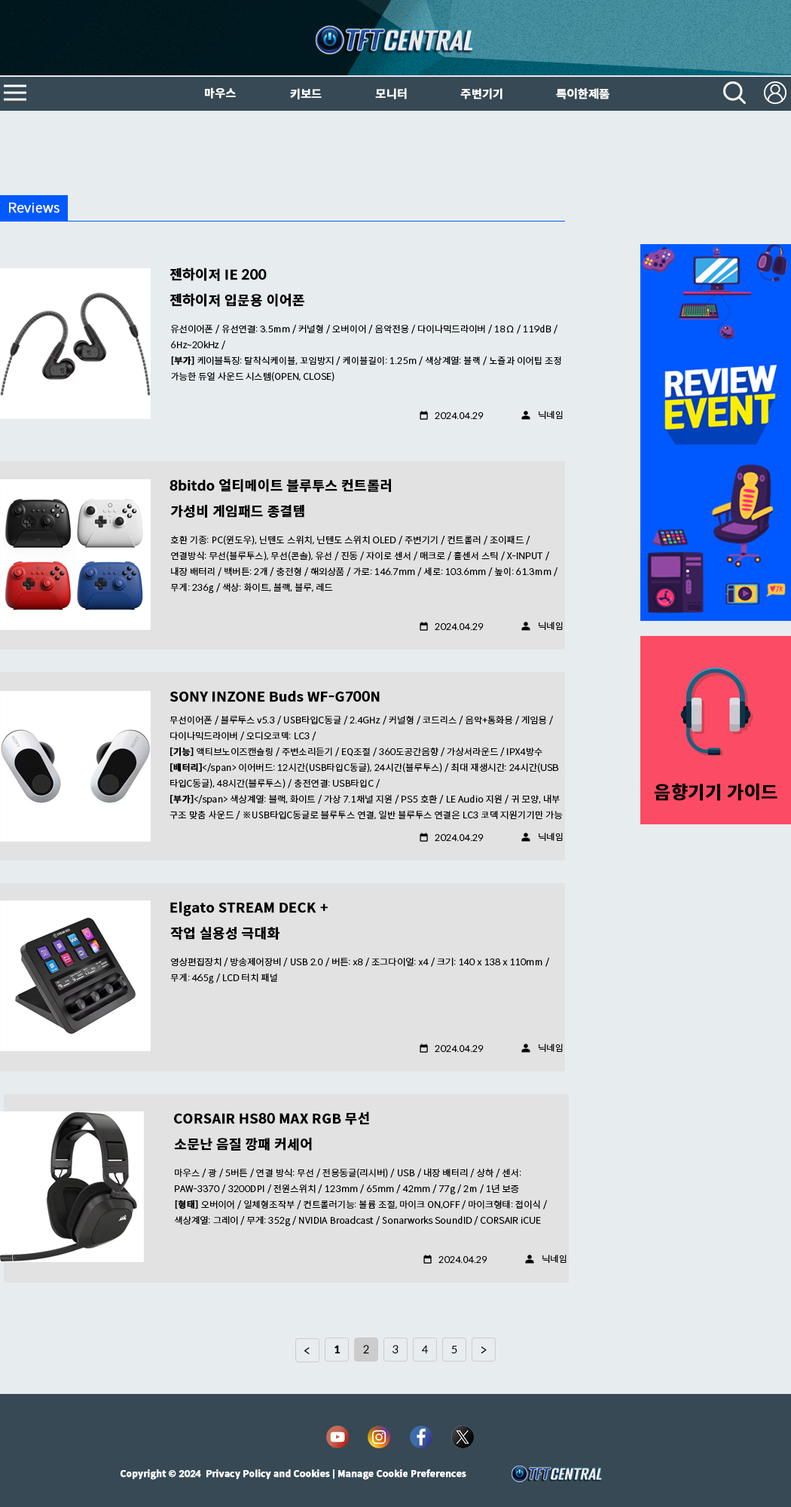
<style>
.page{position:relative;width:791px;height:1507px;background:#e7ecef}
.page>*{position:absolute;margin:0}
.t1{font:11.3px "SpoqaHanSansNeo-Bold";color:#ffffff;font-weight:bold}
.t2{font:13.6px "SpoqaHanSansNeo-Light";color:#ffffff;font-weight:bold}
.t3{font:13.6px "SpoqaHanSansNeo-Bold";color:#000000;font-weight:bold}
.t4{font:9px "SpoqaHanSansNeo-Light";color:#000000;font-weight:bold}
.t5{font:9px "SpoqaHanSansNeo-Bold";color:#000000;font-weight:bold}
.t6{font:12.1px "SpoqaHanSansNeo-Light";color:#000000;font-weight:bold}
.t7{font:10.5px "SpoqaHanSansNeo-Bold";color:#000000;font-weight:bold}
.t8{font:10.5px "SpoqaHanSansNeo-Light";color:#000000;font-weight:bold}
.t9{font:9px "SpoqaHanSansNeo-Bold";color:#ffffff;font-weight:bold}
</style>
<div class="page">
<p class="t1" style="left:205px;top:87px;width:31px;height:12px">마우스</p>
<p class="t1" style="left:290px;top:88px;width:32px;height:11px">키보드</p>
<p class="t1" style="left:375px;top:88px;width:32px;height:11px">모니터</p>
<p class="t1" style="left:460px;top:88px;width:43px;height:11px">주변기기</p>
<p class="t1" style="left:556px;top:88px;width:54px;height:11px">특이한제품</p>
<p class="t2" style="left:9px;top:202px;width:51px;height:11px">Reviews</p>
<p class="t3" style="left:170px;top:268px;width:97px;height:13px">젠하이저 IE 200</p>
<p class="t3" style="left:170px;top:293px;width:134px;height:14px">젠하이저 입문용 이어폰</p>
<p class="t4" style="left:170px;top:324px;width:391px;height:58px">유선이어폰 / 유선연결: 3.5mm / 커널형 / 오버이어 / 음악전용 / 다이나믹드라이버 / 18Ω / 119dB / 6Hz~20kHz /<br><span class="t5">[부가] </span>케이블특징: 탈착식케이블, 꼬임방지 / 케이블길이: 1.25m / 색상계열: 블랙 / 노즐과 이어팁 조정 가능한 듀얼 사운드 시스템(OPEN, CLOSE)</p>
<p class="t4" style="left:435px;top:412px;width:49px;height:8px">2024.04.29</p>
<p class="t4" style="left:539px;top:411px;width:24px;height:9px">닉네임</p>
<p class="t3" style="left:170px;top:478px;width:221px;height:14px">8bitdo 얼티메이트 블루투스 컨트롤러</p>
<p class="t3" style="left:170px;top:505px;width:134px;height:13px">가성비 게임패드 종결템</p>
<p class="t4" style="left:170px;top:535px;width:388px;height:59px">호환 기종: PC(윈도우), 닌텐도 스위치, 닌텐도 스위치 OLED / 주변기기 / 컨트롤러 / 조이패드 / 연결방식: 무선(블루투스), 무선(콘솔), 유선 / 진동 / 자이로 센서 / 매크로 / 홀센서 스틱 / X-INPUT / 내장 배터리 / 백버튼: 2개 / 충전형 / 해외상품 / 가로: 146.7mm / 세로: 103.6mm / 높이: 61.3mm / 무게: 236g / 색상: 화이트, 블랙, 블루, 레드</p>
<p class="t4" style="left:435px;top:623px;width:49px;height:8px">2024.04.29</p>
<p class="t4" style="left:539px;top:622px;width:24px;height:9px">닉네임</p>
<p class="t3" style="left:170px;top:690px;width:210px;height:12px">SONY INZONE Buds WF-G700N</p>
<p class="t4" style="left:170px;top:715px;width:393px;height:105px">무선이어폰 / 블루투스 v5.3 / USB타입C동글 / 2.4GHz / 커널형 / 코드리스 / 음악+통화용 / 게임용 / 다이나믹드라이버 / 오디오코덱: LC3 /<br><span class="t5">[기능] </span>액티브노이즈캔슬링 / 주변소리듣기 / EQ조절 / 360도공간음향 / 가상서라운드 / IPX4방수 <br><span class="t5">[배터리]</span>&lt;/span&gt; 이어버드: 12시간(USB타입C동글), 24시간(블루투스) / 최대 재생시간: 24시간(USB타입C동글), 48시간(블루투스) / 충전연결: USB타입C /<br><span class="t5">[부가]</span>&lt;/span&gt; 색상계열: 블랙, 화이트 / 가상 7.1채널 지원 / PS5 호환 / LE Audio 지원 / 귀 모양, 내부 구조 맞춤 사운드 / ※USB타입C동글로 블루투스 연결, 일반 블루투스 연결은 LC3 코덱 지원기기만 가능</p>
<p class="t4" style="left:539px;top:833px;width:24px;height:9px">닉네임</p>
<p class="t4" style="left:435px;top:834px;width:49px;height:8px">2024.04.29</p>
<p class="t3" style="left:170px;top:901px;width:158px;height:15px">Elgato STREAM DECK +</p>
<p class="t3" style="left:170px;top:927px;width:110px;height:13px">작업 실용성 극대화</p>
<p class="t4" style="left:170px;top:957px;width:380px;height:27px">영상편집장치 / 방송제어장비 / USB 2.0 / 버튼: x8 / 조그다이얼: x4 / 크기: 140 x 138 x 110mm / 무게: 465g / LCD 터치 패널</p>
<p class="t4" style="left:435px;top:1045px;width:49px;height:8px">2024.04.29</p>
<p class="t4" style="left:539px;top:1044px;width:24px;height:9px">닉네임</p>
<p class="t3" style="left:174px;top:1111px;width:195px;height:14px">CORSAIR HS80 MAX RGB 무선</p>
<p class="t3" style="left:174px;top:1137px;width:138px;height:14px">소문난 음질 깡패 커세어</p>
<p class="t4" style="left:174px;top:1168px;width:374px;height:59px">마우스 / 광 / 5버튼 / 연결 방식: 무선 / 전용동글(리시버) / USB / 내장 배터리 / 상하 / 센서: PAW-3370 / 3200DPI / 전원스위치 / 123mm / 65mm / 42mm / 77g / 2m / 1년 보증<br><span class="t5">[형태] </span>오버이어 / 일체형조작부 / 컨트롤러기능: 볼륨 조절, 마이크 ON,OFF / 마이크형태: 접이식 / 색상계열: 그레이 / 무게: 352g / NVIDIA Broadcast / Sonarworks SoundID / CORSAIR iCUE</p>
<p class="t4" style="left:439px;top:1256px;width:49px;height:8px">2024.04.29</p>
<p class="t4" style="left:543px;top:1255px;width:24px;height:9px">닉네임</p>
<p class="t6" style="left:304px;top:1347px;width:6px;height:8px">&lt;</p>
<p class="t7" style="left:335px;top:1345px;width:6px;height:9px">1</p>
<p class="t8" style="left:363px;top:1345px;width:6px;height:9px">2</p>
<p class="t8" style="left:393px;top:1345px;width:6px;height:9px">3</p>
<p class="t8" style="left:422px;top:1345px;width:7px;height:9px">4</p>
<p class="t8" style="left:451px;top:1346px;width:6px;height:8px">5</p>
<p class="t6" style="left:482px;top:1347px;width:5px;height:7px">&gt;</p>
<p class="t9" style="left:121px;top:1469px;width:345px;height:11px">Copyright © 2024  Privacy Policy and Cookies | Manage Cookie Preferences</p>
</div>
